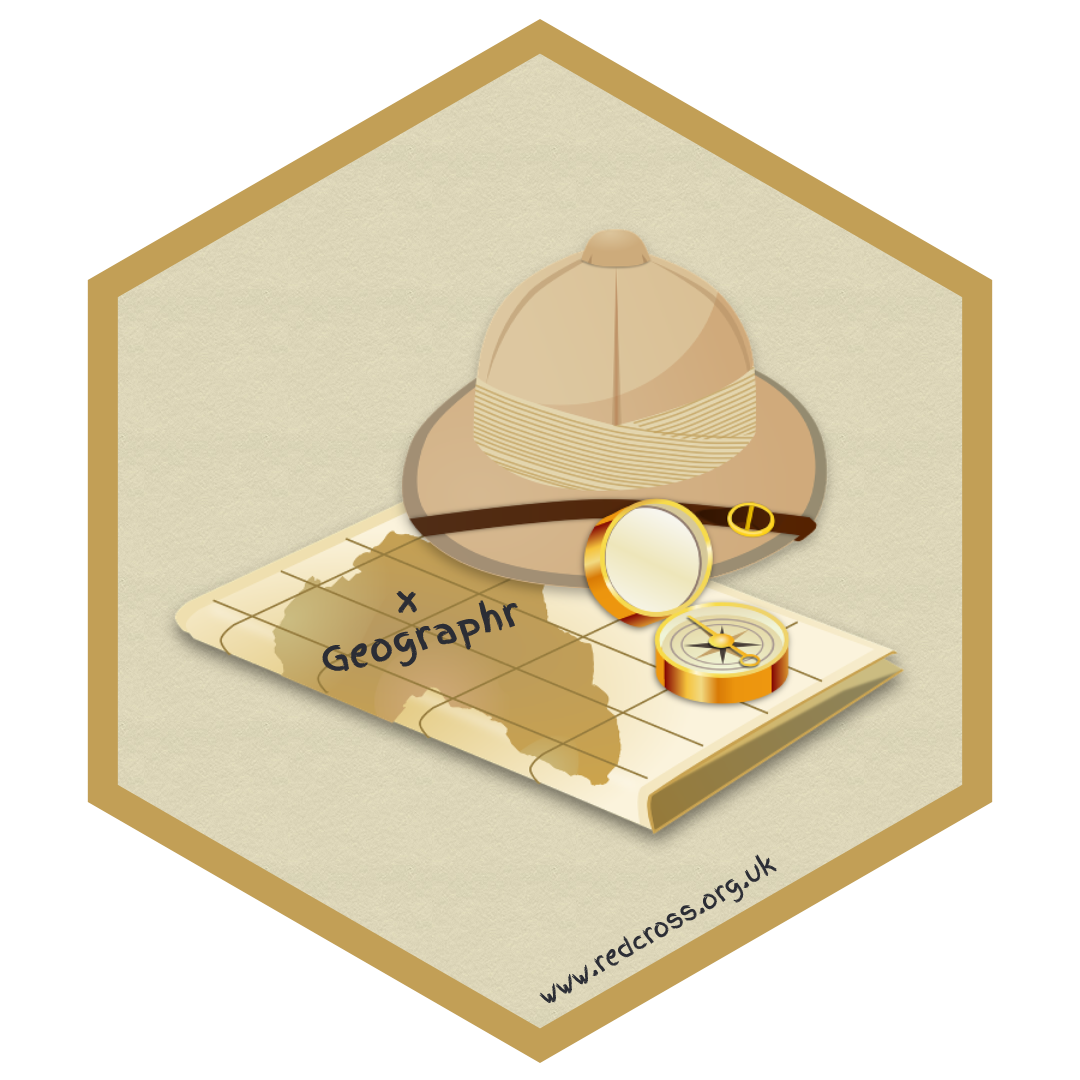
<style>
.page{position:relative;width:1080px;height:1080px;background:#ffffff}
.page>*{position:absolute;margin:0}
.t1{font:36px "FingerPaint-Regular";color:#2b2d35;font-weight:bold}
.t2{font:25px "FingerPaint-Regular";color:#2b2d35}
</style>
<div class="page">
<p class="t1" style="left:396px;top:591px;width:21px;height:22px">x</p>
<p class="t1" style="left:321px;top:600px;width:197px;height:72px;rotate:-15deg">Geographr</p>
<p class="t2" style="left:539px;top:854px;width:238px;height:149px;rotate:-30deg">www.redcross.org.uk</p>
</div>
